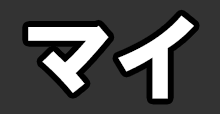
<style>
.page{position:relative;width:220px;height:114px;background:#333333}
.page>*{position:absolute;margin:0}
.t1{font:100px "HGPSoeiKakugothicUB";letter-spacing:0.05em;color:#ffffff}
</style>
<div class="page">
<p class="t1" style="left:28px;top:15px;width:166px;height:84px">マイ</p>
</div>
